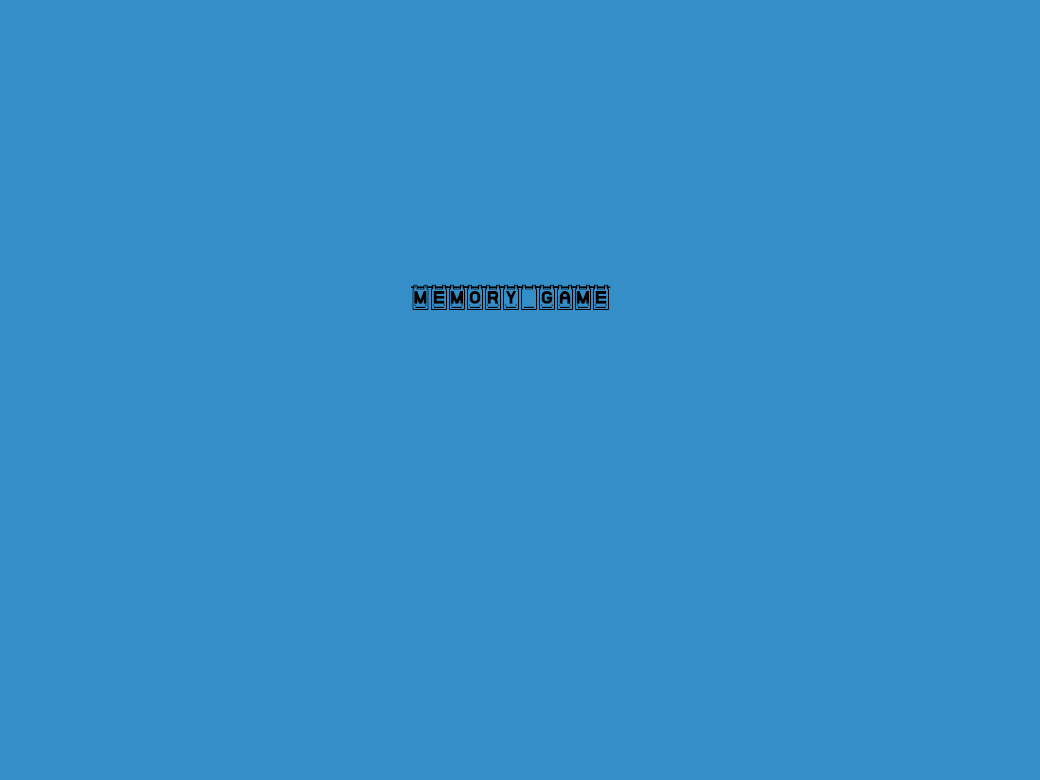
<style>
.page{position:relative;width:1040px;height:780px;background:#348fc9}
.page>*{position:absolute;margin:0}
.t1{font:24px "DataCardsSt";color:#090101}
</style>
<div class="page">
<p class="t1" style="left:411px;top:284px;width:200px;height:26px">Memory game</p>
</div>
